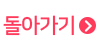
<style>
.page{position:relative;width:100px;height:50px;background:#ffffff}
.page>*{position:absolute;margin:0}
.t1{font:20.8px "NanumSquareB";letter-spacing:-0.04em;color:#ff3b5c}
</style>
<div class="page">
<p class="t1" style="left:3px;top:15px;width:71px;height:21px">돌아가기</p>
</div>
